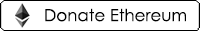
<style>
.page{position:relative;width:200px;height:31px;background:#ffffff}
.page>*{position:absolute;margin:0}
.t1{font:16.7px "CenturyGothic";color:#000000}
</style>
<div class="page">
<p class="t1" style="left:45px;top:8px;width:141px;height:14px">Donate Ethereum</p>
</div>
